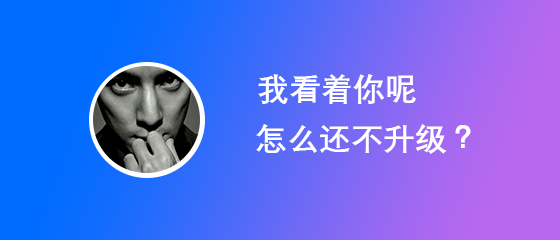
<style>
.page{position:relative;width:560px;height:240px}
.page>*{position:absolute;margin:0}
.t1{font:32px "DengXian-Bold";color:#ffffff}
</style>
<div class="page">
<p class="t1" style="left:258px;top:74px;width:158px;height:30px">我看着你呢</p>
<p class="t1" style="left:256px;top:124px;width:215px;height:30px">怎么还不升级？</p>
</div>
